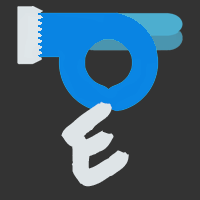
<style>
.page{position:relative;width:200px;height:200px;background:#333333}
.page>*{position:absolute;margin:0}
.t1{font:98.9px "PermanentMarker";letter-spacing:0.075em;color:#dee4e7}
</style>
<div class="page">
<p class="t1" style="left:61px;top:101px;width:68px;height:86px;rotate:-26deg">E</p>
</div>
